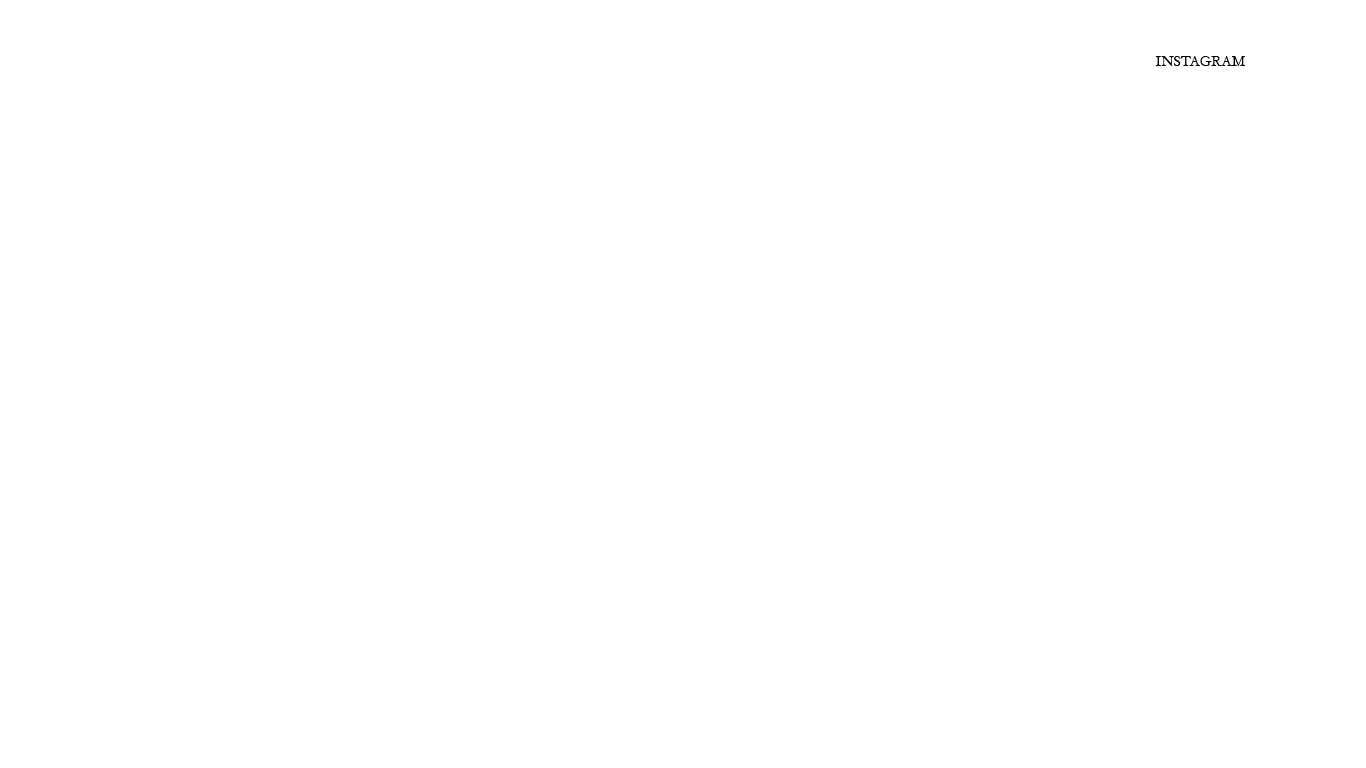
<style>
.page{position:relative;width:1366px;height:768px;background:#ffffff}
.page>*{position:absolute;margin:0}
.t1{font:14px "HoeflerText-Regular";color:#000000}
</style>
<div class="page">
<p class="t1" style="left:1155px;top:56px;width:90px;height:10px">INSTAGRAM</p>
</div>
